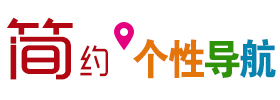
<style>
.page{position:relative;width:280px;height:100px;background:#ffffff}
.page>*{position:absolute;margin:0}
.t1{font:67.2px "RTWSYueGoTrial-Regular";letter-spacing:-0.175em;color:#b20612;font-weight:bold;scale:1.08 1}
.t2{font:42px "FZDHTJW--GB1-0";letter-spacing:-0.075em;color:#e4750a;font-weight:bold;scale:0.89 1}
.t3{font:42px "FZDHTJW--GB1-0";letter-spacing:-0.075em;color:#2f9307;font-weight:bold;scale:0.89 1}
.t4{font:42px "FZDHTJW--GB1-0";letter-spacing:-0.075em;color:#0585af;font-weight:bold;scale:0.89 1}
.t5{font:33.6px "RTWSYueGoTrial-Regular";letter-spacing:-0.175em;color:#b20612;font-weight:bold;scale:0.89 1}
</style>
<div class="page">
<p class="t1" style="left:7px;top:17px;width:66px;height:63px">简</p>
<p class="t2" style="left:133px;top:39px;width:143px;height:40px">个性<span class="t3">导</span><span class="t4">航</span></p>
<p class="t5" style="left:80px;top:45px;width:28px;height:32px">约</p>
</div>
